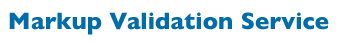
<style>
.page{position:relative;width:348px;height:41px;background:#ffffff}
.page>*{position:absolute;margin:0}
.t1{font:24px "GillSans-Bold";color:#006caa}
</style>
<div class="page">
<p class="t1" style="left:9px;top:12px;width:320px;height:23px">Markup Validation Service</p>
</div>
